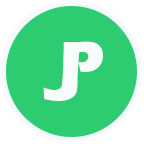
<style>
.page{position:relative;width:144px;height:144px;background:#2dcc70}
.page>*{position:absolute;margin:0}
.t1{font:72px "ErasITC-Bold";color:#f8fcfa}
.t2{font:72px "STHupo";color:#f8fcfa}
</style>
<div class="page">
<p class="t1" style="left:61px;top:41px;width:42px;height:49px">P</p>
<p class="t1" style="left:43px;top:52px;width:37px;height:49px"><span class="t2"><br><br><br>   </span>J</p>
</div>
